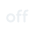
<style>
.page{position:relative;width:34px;height:34px;background:#ffffff}
.page>*{position:absolute;margin:0}
.t1{font:16px "Comfortaa-Bold";color:#ecf0f3}
</style>
<div class="page">
<p class="t1" style="left:6px;top:9px;width:23px;height:14px">off</p>
</div>
